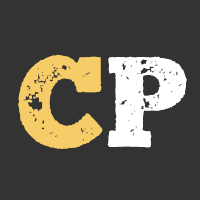
<style>
.page{position:relative;width:200px;height:200px;background:#333333}
.page>*{position:absolute;margin:0}
.t1{font:140px "Distractor-Regular";color:#f6cc68}
.t2{font:140px "Distractor-Regular";color:#ffffff}
</style>
<div class="page">
<p class="t1" style="left:18px;top:54px;width:169px;height:95px">C<span class="t2">P</span></p>
</div>
